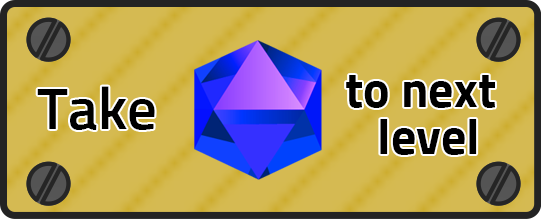
<style>
.page{position:relative;width:541px;height:219px;background:#d5ba52}
.page>*{position:absolute;margin:0}
.t1{font:50px "Sunflower-Bold";color:#000000}
.t2{font:59px "Sunflower-Medium";color:#000000}
</style>
<div class="page">
<p class="t1" style="left:346px;top:75px;width:149px;height:33px">to next</p>
<p class="t2" style="left:37px;top:86px;width:118px;height:44px">Take</p>
<p class="t1" style="left:380px;top:119px;width:97px;height:36px">level</p>
</div>
